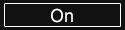
<style>
.page{position:relative;width:125px;height:30px;background:#111111}
.page>*{position:absolute;margin:0}
.t1{font:18px "ArialMT";color:#ffffff}
</style>
<div class="page">
<p class="t1" style="left:51px;top:8px;width:22px;height:15px">On</p>
</div>
